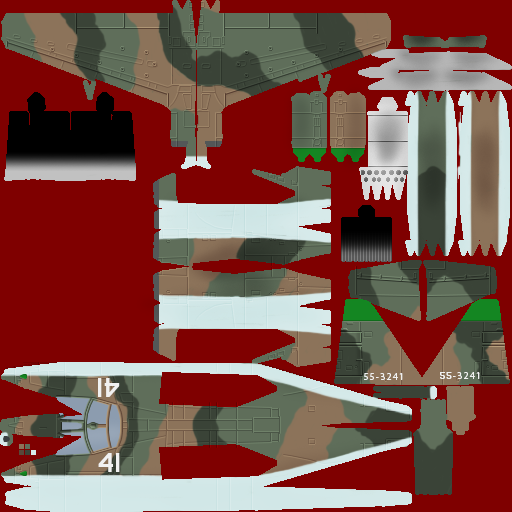
<style>
.page{position:relative;width:512px;height:512px;background:#7f0000}
.page>*{position:absolute;margin:0}
.t1{font:9.5px "MyriadPro-Regular";letter-spacing:0.145em;color:#f1f1f1}
.t2{font:9.5px "USAAF_Stencil";letter-spacing:0.145em;color:#f1f1f1}
.t3{font:27px "USAAF_Stencil";letter-spacing:0.065em;color:#f1f1f1}
</style>
<div class="page">
<p class="t1" style="left:364px;top:373px;width:39px;height:7px">55-3241</p>
<p class="t1" style="left:440px;top:372px;width:40px;height:7px"><span class="t2">55</span>-3241</p>
<p class="t3" style="left:98px;top:378px;width:22px;height:19px;rotate:180deg">41</p>
<p class="t3" style="left:98px;top:453px;width:22px;height:19px">41</p>
</div>
